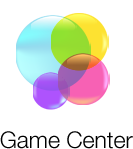
<style>
.page{position:relative;width:133px;height:149px;background:#ffffff}
.page>*{position:absolute;margin:0}
.t1{font:23px "HelveticaNeue-Light";color:#000000}
</style>
<div class="page">
<p class="t1" style="left:0px;top:131px;width:133px;height:18px">Game Center</p>
</div>
